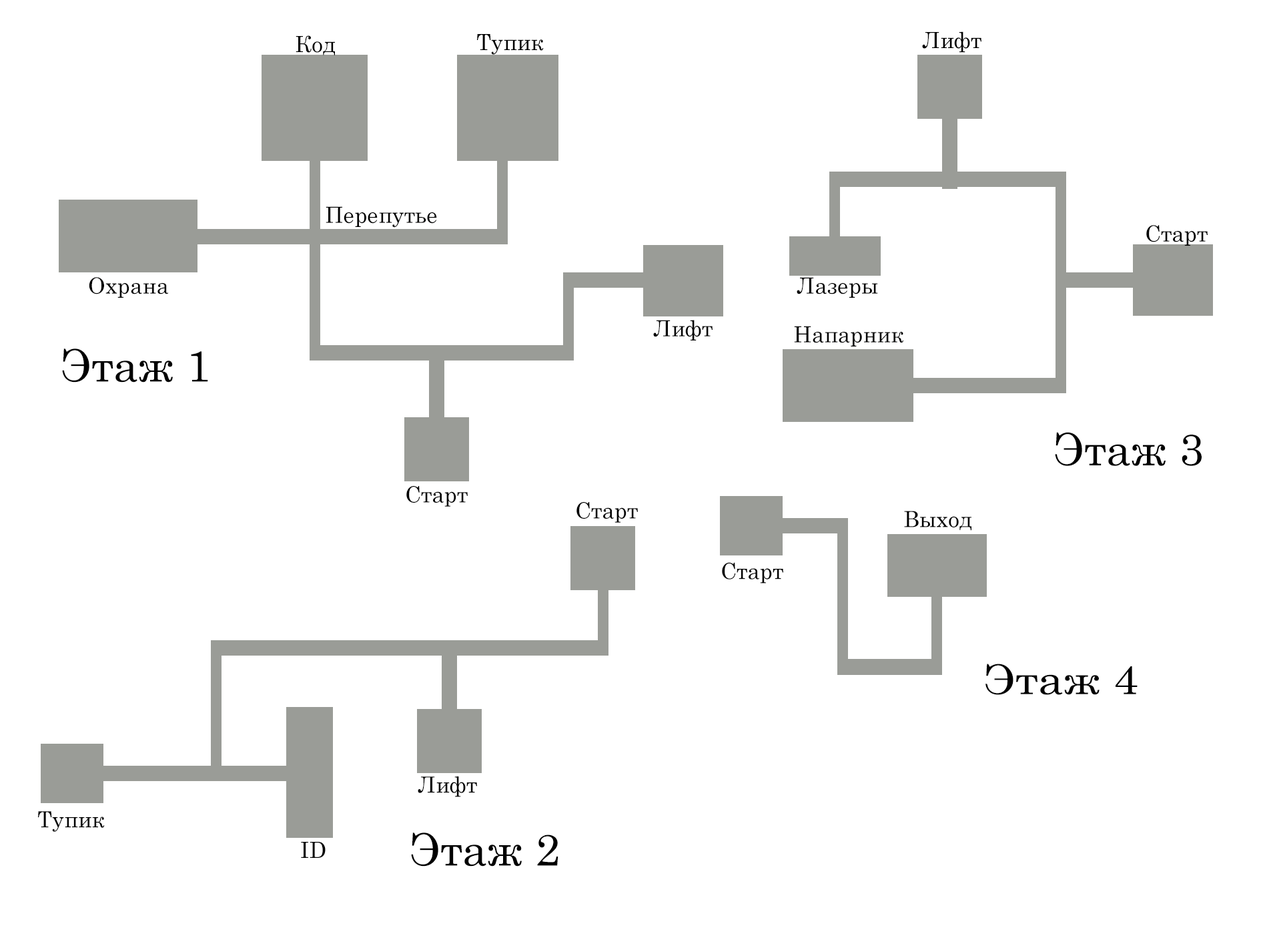
<style>
.page{position:relative;width:1261px;height:946px;background:#ffffff}
.page>*{position:absolute;margin:0}
.t1{font:22.2px "Century";color:#000000}
.t2{font:44.5px "Century";color:#000000}
.t3{font:41px "Century";color:#000000;scale:1.12 1}
</style>
<div class="page">
<p class="t1" style="left:296px;top:35px;width:39px;height:20px">Код</p>
<p class="t1" style="left:477px;top:34px;width:67px;height:21px">Тупик</p>
<p class="t1" style="left:922px;top:31px;width:60px;height:22px">Лифт</p>
<p class="t1" style="left:326px;top:206px;width:111px;height:22px">Перепутье</p>
<p class="t1" style="left:1146px;top:225px;width:62px;height:21px">Старт</p>
<p class="t1" style="left:89px;top:277px;width:80px;height:21px">Охрана</p>
<p class="t1" style="left:797px;top:277px;width:81px;height:21px">Лазеры</p>
<p class="t1" style="left:653px;top:320px;width:60px;height:20px">Лифт</p>
<p class="t1" style="left:794px;top:326px;width:109px;height:20px">Напарник</p>
<p class="t2" style="left:62px;top:348px;width:146px;height:34px">Этаж 1</p>
<p class="t2" style="left:1055px;top:432px;width:147px;height:34px">Этаж 3</p>
<p class="t1" style="left:406px;top:486px;width:62px;height:20px">Старт</p>
<p class="t1" style="left:577px;top:502px;width:61px;height:20px">Старт</p>
<p class="t1" style="left:904px;top:510px;width:68px;height:20px">Выход</p>
<p class="t1" style="left:722px;top:562px;width:61px;height:21px">Старт</p>
<p class="t3" style="left:986px;top:663px;width:152px;height:32px">Этаж 4</p>
<p class="t1" style="left:418px;top:776px;width:59px;height:21px">Лифт</p>
<p class="t1" style="left:38px;top:811px;width:67px;height:20px">Тупик</p>
<p class="t2" style="left:411px;top:832px;width:148px;height:34px">Этаж 2</p>
<p class="t1" style="left:301px;top:841px;width:25px;height:16px">ID</p>
</div>
